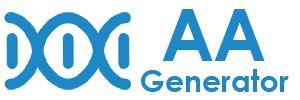
<style>
.page{position:relative;width:300px;height:100px;background:#ffffff}
.page>*{position:absolute;margin:0}
.t1{font:72px "CenturyGothic-Bold";color:#1d88c5}
.t2{font:30px "CenturyGothic-Bold";color:#1d88c5}
</style>
<div class="page">
<p class="t1" style="left:162px;top:9px;width:51px;height:52px">A</p>
<p class="t1" style="left:214px;top:9px;width:51px;height:52px">A</p>
<p class="t2" style="left:141px;top:69px;width:148px;height:23px">Generator</p>
</div>
